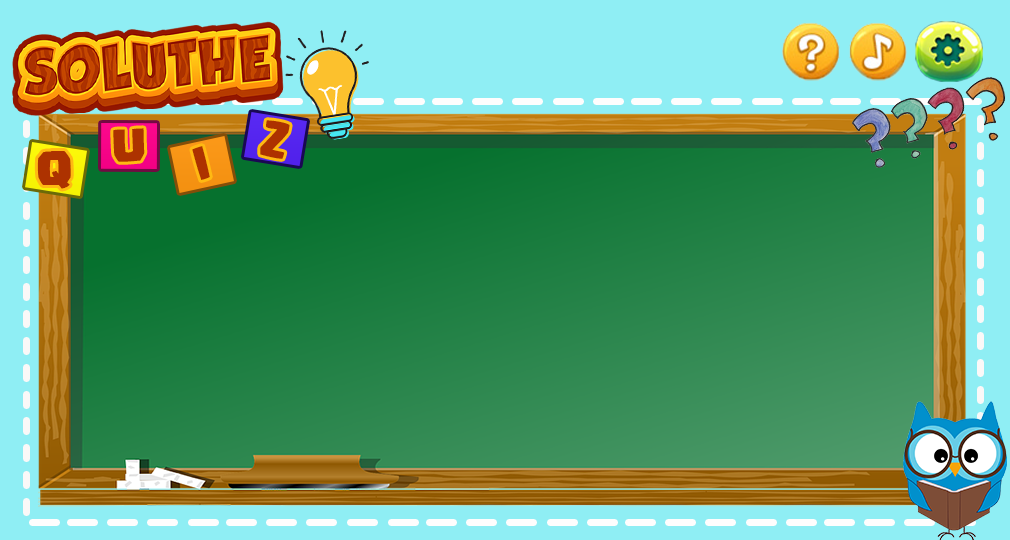
<style>
.page{position:relative;width:1010px;height:540px;background:#8feef4}
.page>*{position:absolute;margin:0}
.t1{font:36px "Supercell-Magic";color:#ad3200}
</style>
<div class="page">
<p class="t1" style="left:260px;top:120px;width:30px;height:39px;rotate:12deg">Z</p>
<p class="t1" style="left:113px;top:128px;width:32px;height:34px;rotate:-2deg">U</p>
<p class="t1" style="left:192px;top:146px;width:18px;height:34px;rotate:-16deg">I</p>
<p class="t1" style="left:37px;top:151px;width:34px;height:38px">Q</p>
</div>
